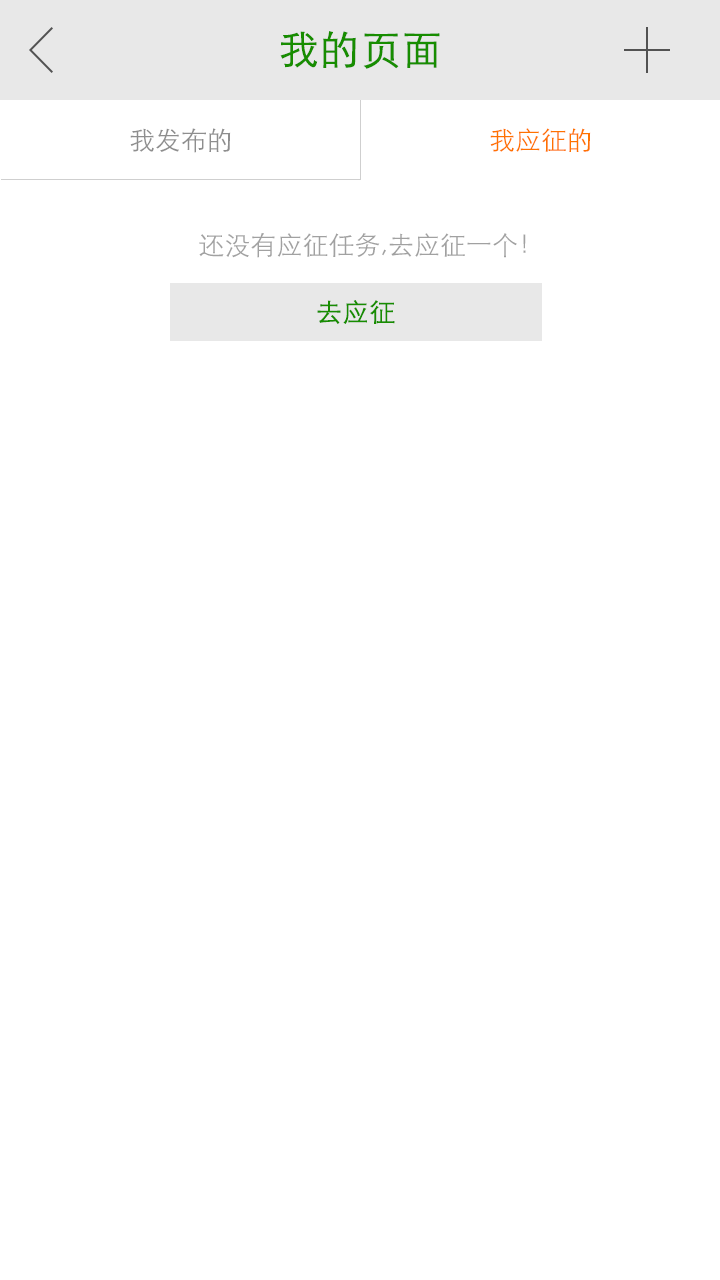
<style>
.page{position:relative;width:720px;height:1280px;background:#ffffff}
.page>*{position:absolute;margin:0}
.t1{font:40px "STXihei";color:#178d00;font-weight:bold}
.t2{font:26px "STXihei";color:#8e8e8e}
.t3{font:26px "STXihei";color:#ff7200}
.t4{font:26px "STXihei";color:#a1a1a1}
.t5{font:26px "STXihei";color:#178d00;font-weight:bold}
</style>
<div class="page">
<p class="t1" style="left:280px;top:31px;width:160px;height:38px">我的页面</p>
<p class="t2" style="left:130px;top:128px;width:101px;height:25px">我发布的</p>
<p class="t3" style="left:490px;top:128px;width:101px;height:24px">我应征的</p>
<p class="t4" style="left:199px;top:233px;width:327px;height:25px">还没有应征任务,去应征一个！</p>
<p class="t5" style="left:317px;top:300px;width:78px;height:24px">去应征</p>
</div>
